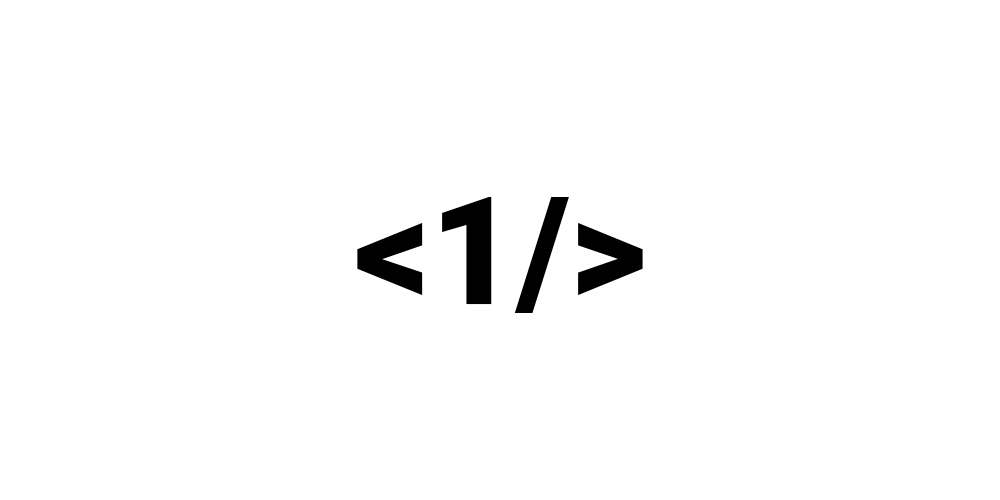
<style>
.page{position:relative;width:1000px;height:500px;background:#ffffff}
.page>*{position:absolute;margin:0}
.t1{font:150px "Roboto-Black"}
.t2{font:150px "Roboto-Black";color:#000000}
</style>
<div class="page">
<p class="t1" style="left:351px;top:196px;width:297px;height:117px">&lt;C/&gt;</p>
<p class="t1" style="left:351px;top:196px;width:297px;height:117px">&lt;C/&gt;</p>
<p class="t1" style="left:351px;top:196px;width:297px;height:117px">&lt;C/&gt;</p>
<p class="t2" style="left:357px;top:197px;width:286px;height:116px">&lt;1/&gt;</p>
<p class="t2" style="left:357px;top:197px;width:286px;height:116px">&lt;1/&gt;</p>
</div>
